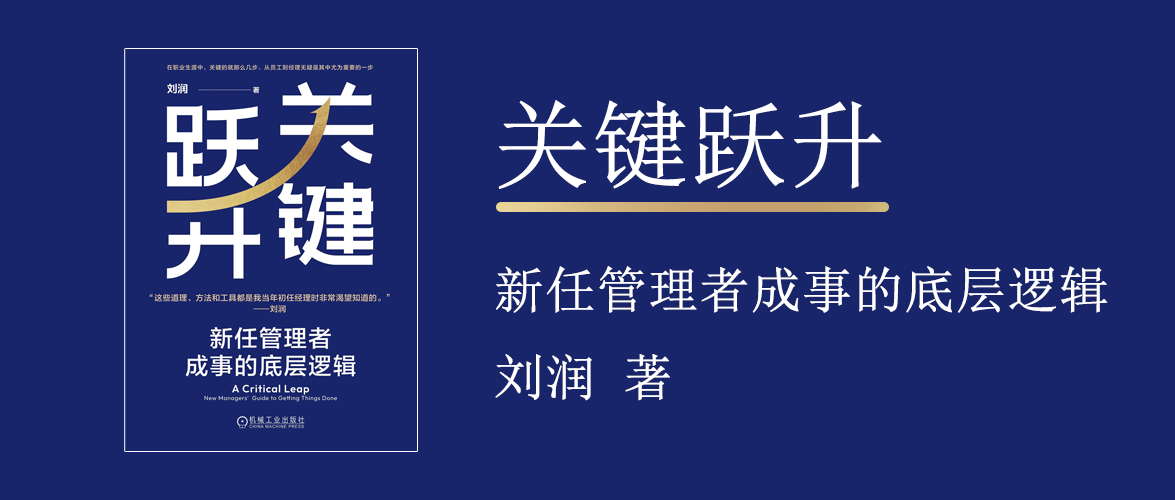
<style>
.page{position:relative;width:1175px;height:500px;background:#18256b}
.page>*{position:absolute;margin:0}
.t1{font:50px "SimSun";color:#ffffff;font-weight:bold}
.t2{font:96px "SimSun";color:#ffffff;font-weight:bold}
</style>
<div class="page">
<p class="t1" style="left:495px;top:100px;width:613px;height:301px"><span class="t2">关键跃升<br></span>新任管理者成事的底层逻辑<br>刘润 著</p>
</div>
